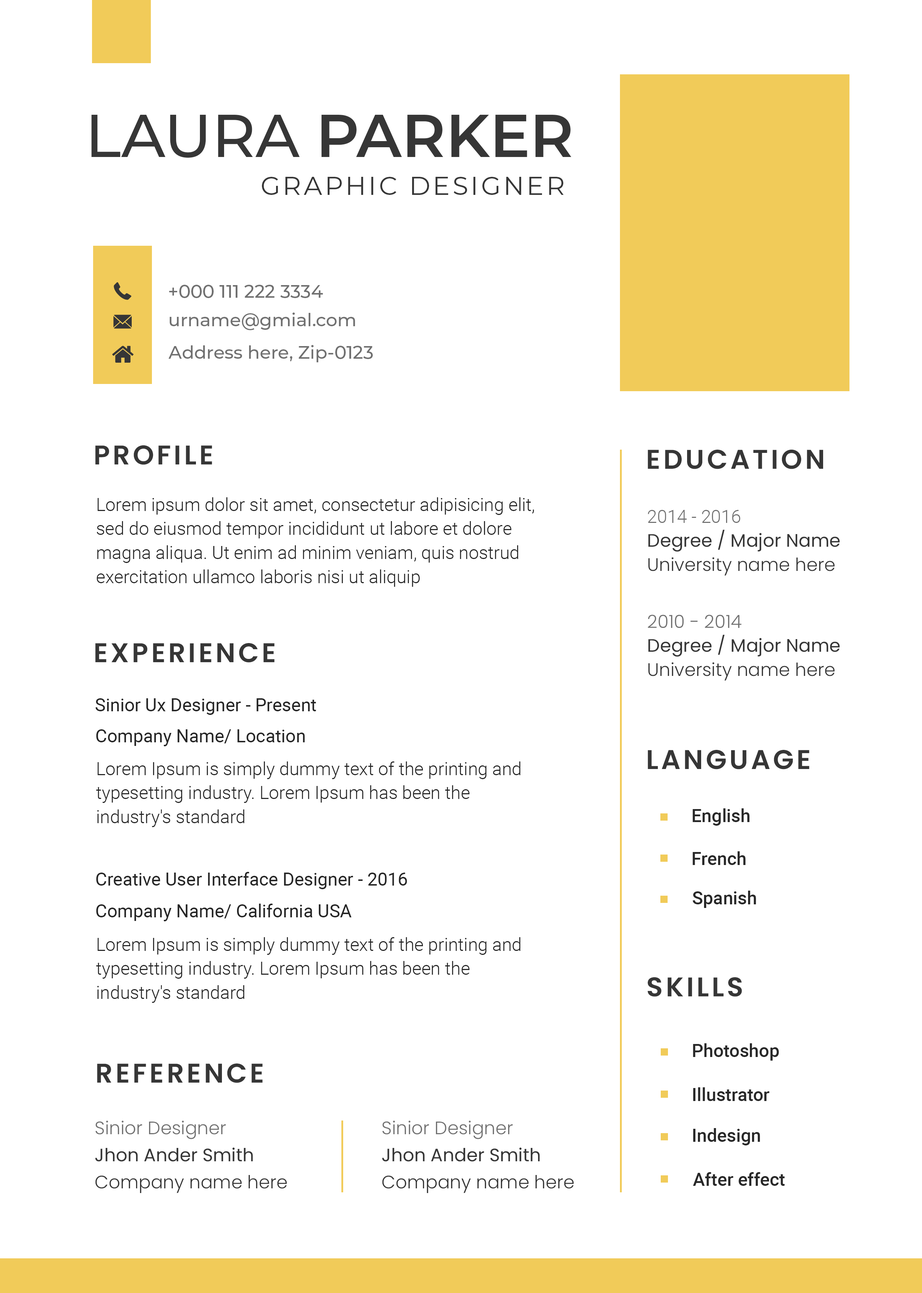
<style>
.page{position:relative;width:922px;height:1293px;background:#ffffff}
.page>*{position:absolute;margin:0}
.t1{font:60.2px "Montserrat-SemiBold";color:#363636;text-transform:uppercase}
.t2{font:60.2px "Montserrat-Medium";color:#363636;text-transform:uppercase}
.t3{font:25.6px "Montserrat-Regular";letter-spacing:0.1em;color:#363636;text-transform:uppercase}
.t4{font:18px "Montserrat-Medium";color:#707070}
.t5{font:27.1px "Poppins-SemiBold";letter-spacing:0.1em;color:#363636;text-transform:uppercase}
.t6{font:18px/24.1px "Roboto-Light";color:#252525}
.t7{font:18px/24.1px "Poppins-Light";color:#363636}
.t8{font:18px/24.1px "Roboto-Light";color:#707070}
.t9{font:18px/24.1px "Poppins-Regular";color:#363636}
.t10{font:18px/24.1px "Poppins-Light";color:#707070}
.t11{font:18px "Roboto-Regular";color:#252525}
.t12{font:18px "Roboto-Regular";color:#252525;text-transform:uppercase}
.t13{font:18px "Roboto-Medium";color:#282828}
.t14{font:18px/27.1px "Poppins-Light";color:#363636}
.t15{font:18px/27.1px "Poppins-Light";color:#707070}
.t16{font:18px/27.1px "Poppins-Regular";color:#363636}
</style>
<div class="page">
<p class="t1" style="left:91px;top:114px;width:480px;height:44px"><span class="t2">Laura </span>Parker</p>
<p class="t3" style="left:262px;top:177px;width:302px;height:18px">graphic designer</p>
<p class="t4" style="left:169px;top:285px;width:154px;height:13px">+000 111 222 3334</p>
<p class="t4" style="left:170px;top:313px;width:185px;height:17px">urname@gmial.com</p>
<p class="t4" style="left:169px;top:345px;width:204px;height:17px">Address here, Zip-0123</p>
<p class="t5" style="left:95px;top:445px;width:117px;height:20px">profile</p>
<p class="t5" style="left:648px;top:450px;width:175px;height:19px">Education</p>
<p class="t6" style="left:97px;top:497px;width:437px;height:90px">Lorem ipsum dolor sit amet, consectetur adipisicing elit, sed do eiusmod tempor incididunt ut labore et dolore magna aliqua. Ut enim ad minim veniam, quis nostrud exercitation ullamco laboris nisi ut aliquip</p>
<p class="t7" style="left:648px;top:510px;width:192px;height:66px"><span class="t8">2014 - 2016<br></span><span class="t9">Degree / Major Name<br></span>University name here</p>
<p class="t7" style="left:648px;top:615px;width:192px;height:66px"><span class="t10">2010 - 2014<br></span><span class="t9">Degree / Major Name<br></span>University name here</p>
<p class="t5" style="left:95px;top:643px;width:180px;height:20px">experience</p>
<p class="t11" style="left:96px;top:698px;width:220px;height:17px">Sinior Ux Designer<span class="t12"> - </span>Present</p>
<p class="t11" style="left:96px;top:729px;width:209px;height:17px">Company Name/ Location</p>
<p class="t5" style="left:648px;top:750px;width:162px;height:19px">language</p>
<p class="t6" style="left:96px;top:762px;width:424px;height:65px">Lorem Ipsum is simply dummy text of the printing and typesetting industry. Lorem Ipsum has been the industry's standard</p>
<p class="t13" style="left:693px;top:808px;width:57px;height:18px">English</p>
<p class="t13" style="left:693px;top:851px;width:53px;height:14px">French</p>
<p class="t11" style="left:96px;top:872px;width:311px;height:17px">Creative User Interface Designer<span class="t12"> - 2016</span></p>
<p class="t13" style="left:693px;top:891px;width:63px;height:17px">Spanish</p>
<p class="t11" style="left:96px;top:904px;width:256px;height:17px">Company Name/ California USA</p>
<p class="t6" style="left:96px;top:937px;width:424px;height:66px">Lorem Ipsum is simply dummy text of the printing and typesetting industry. Lorem Ipsum has been the industry's standard</p>
<p class="t5" style="left:647px;top:977px;width:95px;height:20px">skills</p>
<p class="t13" style="left:693px;top:1043px;width:86px;height:18px">Photoshop</p>
<p class="t5" style="left:97px;top:1064px;width:166px;height:19px">reference</p>
<p class="t13" style="left:693px;top:1087px;width:76px;height:14px">Illustrator</p>
<p class="t14" style="left:95px;top:1121px;width:192px;height:72px"><span class="t15">Sinior Designer<br></span><span class="t16">Jhon Ander Smith<br></span>Company name here</p>
<p class="t14" style="left:382px;top:1121px;width:192px;height:72px"><span class="t15">Sinior Designer<br></span><span class="t16">Jhon Ander Smith<br></span>Company name here</p>
<p class="t13" style="left:693px;top:1128px;width:67px;height:18px">Indesign</p>
<p class="t13" style="left:693px;top:1172px;width:92px;height:14px">After effect</p>
</div>
